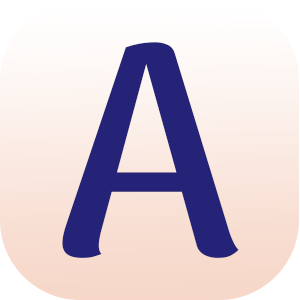
<style>
.page{position:relative;width:300px;height:300px}
.page>*{position:absolute;margin:0}
.t1{font:297.8px "Arima-SemiBold";color:#242377}
</style>
<div class="page">
<p class="t1" style="left:62px;top:42px;width:177px;height:216px">A</p>
</div>
